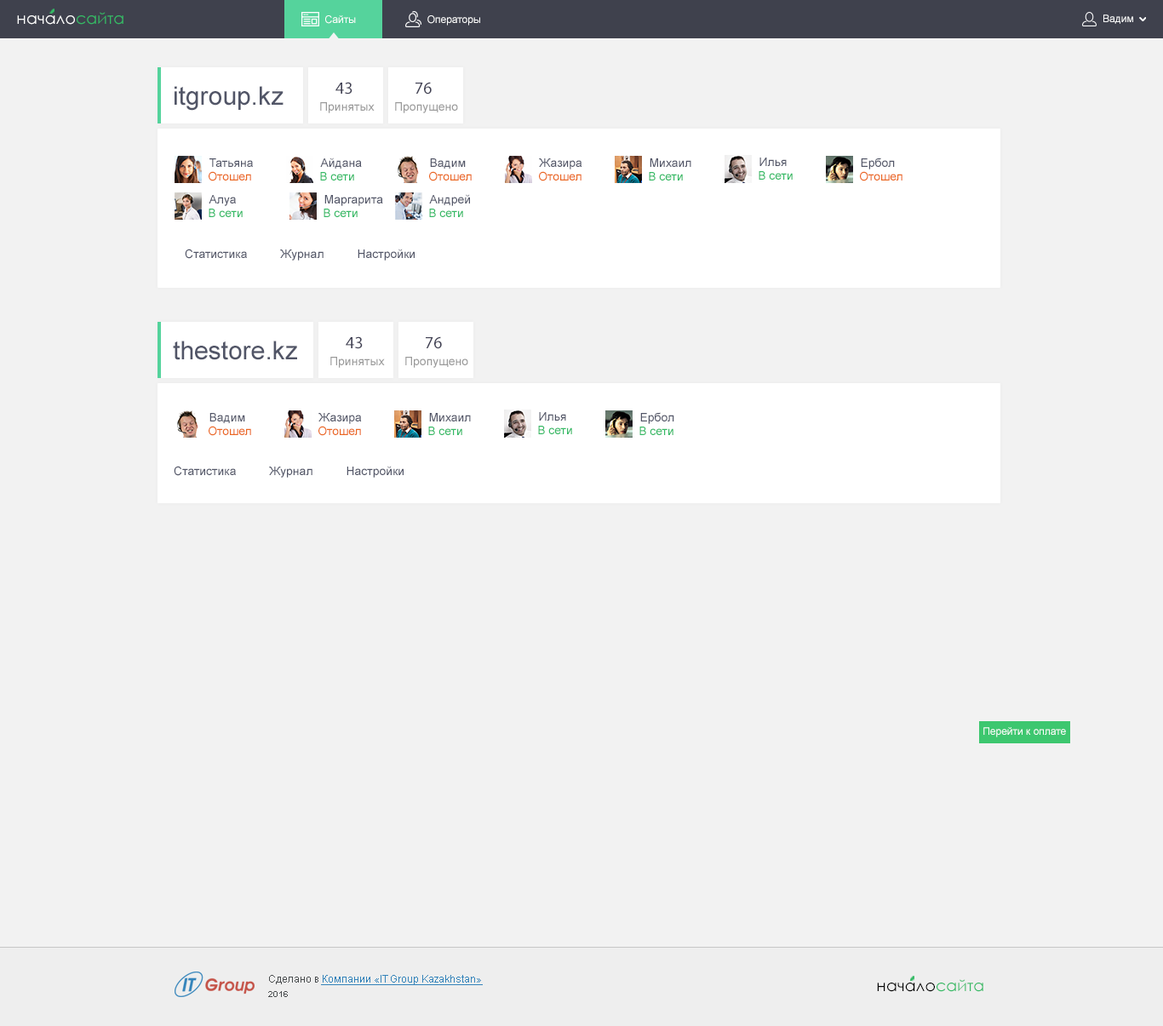
<style>
.page{position:relative;width:1163px;height:1026px;background:#f2f2f2}
.page>*{position:absolute;margin:0}
.t1{font:15.8px "CenturyGothic";color:#ffffff}
.t2{font:15.8px "CenturyGothic";color:#34ba65}
.t3{font:10.2px "ArialMT";color:#ffffff}
.t4{font:25.5px "ArialMT";color:#515567}
.t5{font:17px "MyriadPro-Regular";color:#424255}
.t6{font:11.9px "ArialMT";color:#9a9a9a}
.t7{font:11.9px "ArialMT";color:#515567}
.t8{font:11.9px "ArialMT";color:#eb6821}
.t9{font:11.9px "ArialMT";color:#34ba65}
.t10{font:10.2px "ArialMT";color:#3483ba;text-decoration:underline}
.t11{font:10.2px "ArialMT";color:#4a4d4f}
.t12{font:15.8px "CenturyGothic";color:#000000}
.t13{font:8.5px "Arial-BoldMT";color:#4a4d4f}
</style>
<div class="page">
<p class="t1" style="left:17px;top:12px;width:106px;height:13px">начало<span class="t2">сайта</span></p>
<p class="t3" style="left:325px;top:15px;width:31px;height:9px">Сайты</p>
<p class="t3" style="left:427px;top:15px;width:53px;height:11px">Операторы</p>
<p class="t3" style="left:1103px;top:14px;width:30px;height:10px">Вадим</p>
<p class="t4" style="left:174px;top:86px;width:109px;height:25px">itgroup.kz</p>
<p class="t5" style="left:335px;top:82px;width:17px;height:12px">43</p>
<p class="t5" style="left:415px;top:82px;width:17px;height:12px">76</p>
<p class="t6" style="left:320px;top:102px;width:54px;height:11px">Принятых</p>
<p class="t6" style="left:395px;top:102px;width:63px;height:11px">Пропущено</p>
<p class="t7" style="left:209px;top:158px;width:44px;height:9px">Татьяна</p>
<p class="t7" style="left:320px;top:157px;width:42px;height:12px">Айдана</p>
<p class="t7" style="left:430px;top:158px;width:36px;height:11px">Вадим</p>
<p class="t7" style="left:539px;top:158px;width:43px;height:11px">Жазира</p>
<p class="t7" style="left:649px;top:158px;width:42px;height:9px">Михаил</p>
<p class="t7" style="left:759px;top:157px;width:27px;height:9px">Илья</p>
<p class="t7" style="left:860px;top:157px;width:35px;height:12px">Ербол</p>
<p class="t8" style="left:209px;top:171px;width:42px;height:10px">Отошел</p>
<p class="t9" style="left:320px;top:172px;width:34px;height:8px">В сети</p>
<p class="t8" style="left:429px;top:171px;width:43px;height:10px">Отошел</p>
<p class="t8" style="left:539px;top:171px;width:42px;height:10px">Отошел</p>
<p class="t9" style="left:649px;top:172px;width:34px;height:8px">В сети</p>
<p class="t9" style="left:758px;top:171px;width:34px;height:9px">В сети</p>
<p class="t8" style="left:860px;top:171px;width:42px;height:10px">Отошел</p>
<p class="t7" style="left:209px;top:195px;width:27px;height:11px">Алуа</p>
<p class="t7" style="left:324px;top:195px;width:59px;height:11px">Маргарита</p>
<p class="t7" style="left:429px;top:194px;width:41px;height:12px">Андрей</p>
<p class="t9" style="left:209px;top:209px;width:34px;height:8px">В сети</p>
<p class="t9" style="left:323px;top:209px;width:34px;height:8px">В сети</p>
<p class="t9" style="left:429px;top:209px;width:34px;height:8px">В сети</p>
<p class="t7" style="left:185px;top:249px;width:230px;height:11px">Статистика          Журнал          Настройки</p>
<p class="t4" style="left:173px;top:340px;width:124px;height:20px">thestore.kz</p>
<p class="t5" style="left:346px;top:336px;width:17px;height:13px">43</p>
<p class="t5" style="left:426px;top:336px;width:16px;height:13px">76</p>
<p class="t6" style="left:330px;top:357px;width:55px;height:11px">Принятых</p>
<p class="t6" style="left:405px;top:357px;width:63px;height:11px">Пропущено</p>
<p class="t7" style="left:209px;top:413px;width:36px;height:10px">Вадим</p>
<p class="t7" style="left:318px;top:413px;width:44px;height:11px">Жазира</p>
<p class="t7" style="left:429px;top:413px;width:42px;height:8px">Михаил</p>
<p class="t7" style="left:539px;top:412px;width:27px;height:8px">Илья</p>
<p class="t7" style="left:640px;top:412px;width:34px;height:12px">Ербол</p>
<p class="t8" style="left:209px;top:426px;width:42px;height:10px">Отошел</p>
<p class="t8" style="left:318px;top:426px;width:43px;height:10px">Отошел</p>
<p class="t9" style="left:538px;top:426px;width:34px;height:8px">В сети</p>
<p class="t9" style="left:428px;top:426px;width:34px;height:9px">В сети</p>
<p class="t9" style="left:639px;top:426px;width:34px;height:9px">В сети</p>
<p class="t7" style="left:174px;top:466px;width:229px;height:11px">Статистика          Журнал          Настройки</p>
<p class="t3" style="left:983px;top:727px;width:83px;height:10px">Перейти к оплате</p>
<p class="t10" style="left:269px;top:975px;width:214px;height:10px"><span class="t11">Сделано в </span>Компании «IT Group Kazakhstan»</p>
<p class="t12" style="left:877px;top:979px;width:106px;height:13px">начало<span class="t2">сайта</span></p>
<p class="t13" style="left:268px;top:991px;width:20px;height:6px">2016</p>
</div>
